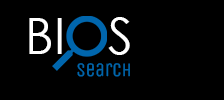
<style>
.page{position:relative;width:224px;height:100px;background:#000000}
.page>*{position:absolute;margin:0}
.t1{font:50px "CenturyGothic";color:#ffffff}
.t2{font:19px "UnicaOne-Regular";color:#0066ad}
</style>
<div class="page">
<p class="t1" style="left:29px;top:17px;width:101px;height:38px">BIOS</p>
<p class="t2" style="left:77px;top:63px;width:53px;height:14px">Search</p>
</div>
